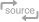
<style>
.page{position:relative;width:39px;height:22px;background:#ffffff}
.page>*{position:absolute;margin:0}
.t1{font:10px "Helvetica";color:#a2a2a2}
</style>
<div class="page">
<p class="t1" style="left:5px;top:8px;width:30px;height:6px">source</p>
</div>
